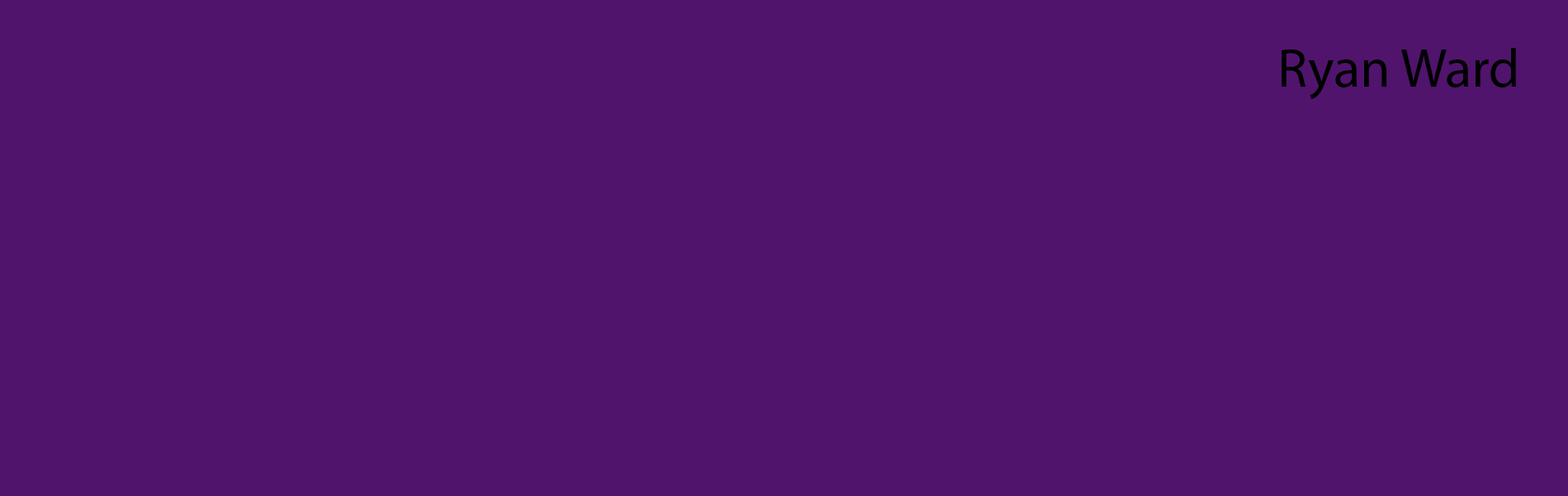
<style>
.page{position:relative;width:1568px;height:496px;background:#50146c}
.page>*{position:absolute;margin:0}
.t1{font:55px "MyriadPro-Regular";color:#000000}
</style>
<div class="page">
<p class="t1" style="left:1282px;top:48px;width:234px;height:51px">Ryan Ward</p>
</div>
